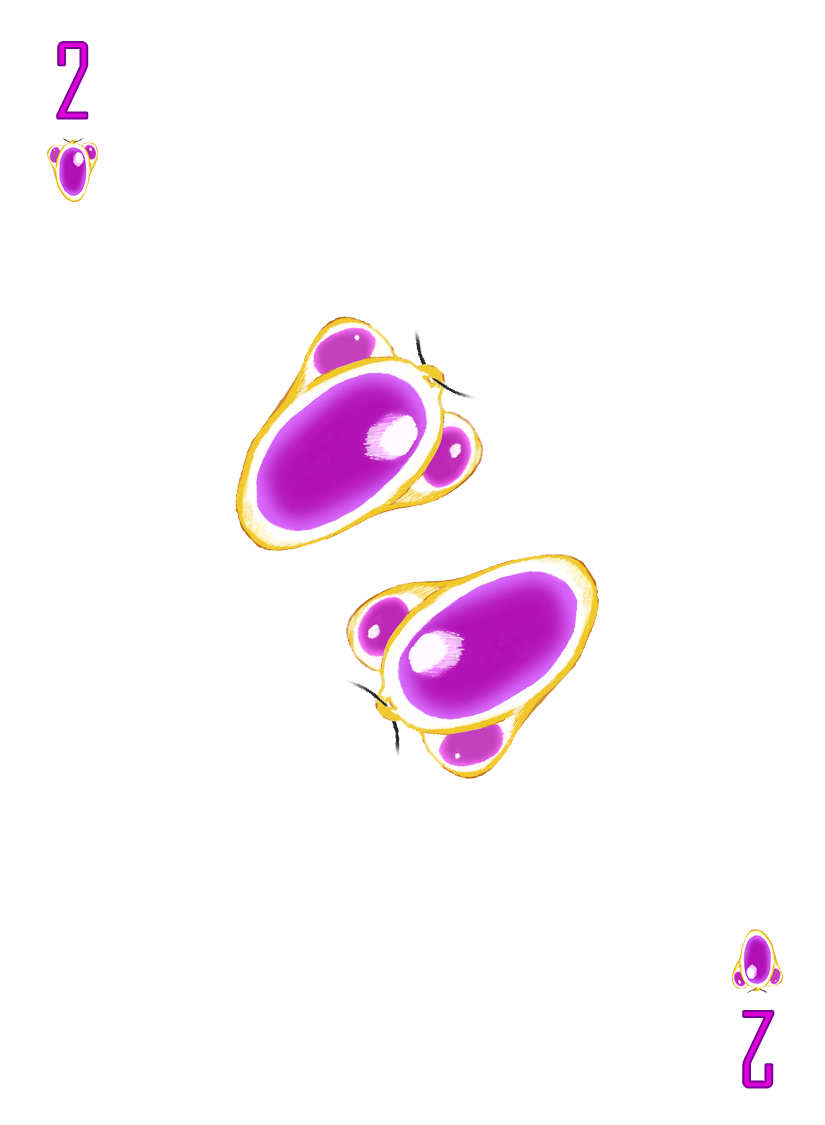
<style>
.page{position:relative;width:825px;height:1125px;background:#ffffff}
.page>*{position:absolute;margin:0}
.t1{font:100px "AgencyFB-Reg";color:#de00d8}
</style>
<div class="page">
<p class="t1" style="left:57px;top:42px;width:31px;height:77px">2</p>
<p class="t1" style="left:743px;top:1011px;width:31px;height:77px;rotate:180deg">2</p>
</div>
